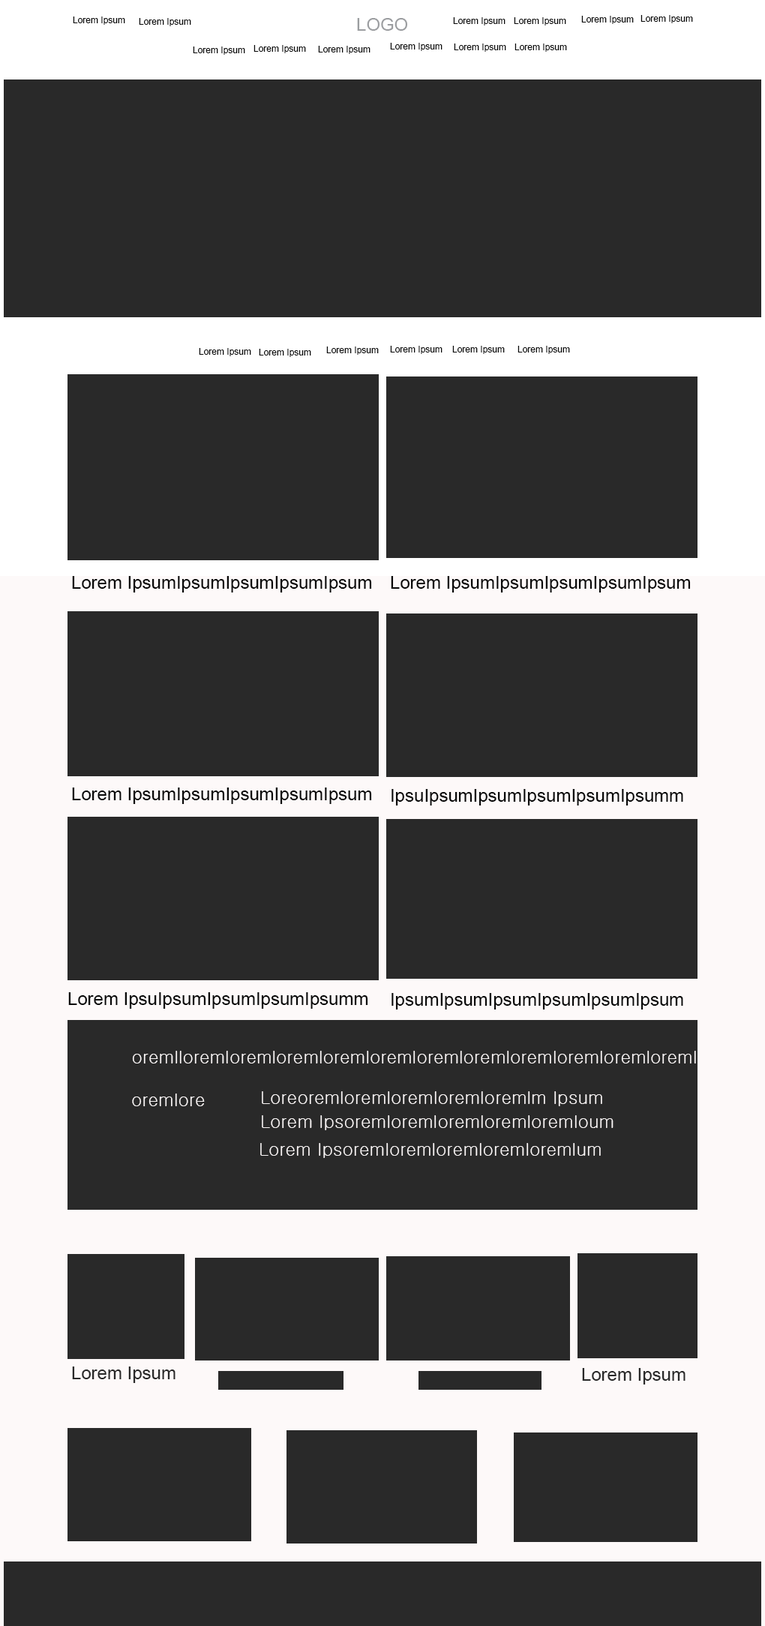
<style>
.page{position:relative;width:765px;height:1626px;background:#292929}
.page>*{position:absolute;margin:0}
.t1{font:9px "ArialMT";color:#080808}
.t2{font:18px "ArialMT";color:#9b9da0}
.t3{font:18px "ArialMT";color:#080808}
.t4{font:18px "Gulim";color:#faf6f6}
.t5{font:18px "ArialMT";color:#292929}
</style>
<div class="page">
<p class="t1" style="left:73px;top:16px;width:52px;height:9px">Lorem Ipsum</p>
<p class="t1" style="left:453px;top:17px;width:53px;height:9px">Lorem Ipsum</p>
<p class="t1" style="left:514px;top:17px;width:52px;height:9px">Lorem Ipsum</p>
<p class="t1" style="left:581px;top:16px;width:53px;height:8px">Lorem Ipsum</p>
<p class="t1" style="left:640px;top:15px;width:53px;height:8px">Lorem Ipsum</p>
<p class="t1" style="left:139px;top:18px;width:52px;height:8px">Lorem Ipsum</p>
<p class="t2" style="left:357px;top:18px;width:51px;height:13px">LOGO</p>
<p class="t1" style="left:193px;top:46px;width:52px;height:9px">Lorem Ipsum</p>
<p class="t1" style="left:254px;top:45px;width:52px;height:8px">Lorem Ipsum</p>
<p class="t1" style="left:318px;top:46px;width:52px;height:8px">Lorem Ipsum</p>
<p class="t1" style="left:390px;top:43px;width:52px;height:8px">Lorem Ipsum</p>
<p class="t1" style="left:454px;top:44px;width:52px;height:8px">Lorem Ipsum</p>
<p class="t1" style="left:514px;top:44px;width:53px;height:8px">Lorem Ipsum</p>
<p class="t1" style="left:199px;top:348px;width:52px;height:8px">Lorem Ipsum</p>
<p class="t1" style="left:259px;top:349px;width:52px;height:8px">Lorem Ipsum</p>
<p class="t1" style="left:326px;top:346px;width:53px;height:9px">Lorem Ipsum</p>
<p class="t1" style="left:390px;top:346px;width:52px;height:8px">Lorem Ipsum</p>
<p class="t1" style="left:452px;top:346px;width:53px;height:8px">Lorem Ipsum</p>
<p class="t1" style="left:518px;top:346px;width:52px;height:8px">Lorem Ipsum</p>
<p class="t3" style="left:72px;top:576px;width:300px;height:16px">Lorem IpsumIpsumIpsumIpsumIpsum</p>
<p class="t3" style="left:391px;top:576px;width:300px;height:16px">Lorem IpsumIpsumIpsumIpsumIpsum</p>
<p class="t3" style="left:72px;top:788px;width:300px;height:16px">Lorem IpsumIpsumIpsumIpsumIpsum</p>
<p class="t3" style="left:392px;top:789px;width:291px;height:17px">IpsuIpsumIpsumIpsumIpsumIpsumm</p>
<p class="t3" style="left:68px;top:992px;width:300px;height:17px">Lorem IpsuIpsumIpsumIpsumIpsumm</p>
<p class="t3" style="left:392px;top:993px;width:291px;height:17px">IpsumIpsumIpsumIpsumIpsumIpsum</p>
<p class="t4" style="left:132px;top:1051px;width:564px;height:13px">oremlloremloremloremloremloremloremloremloremloremloremloreml</p>
<p class="t4" style="left:132px;top:1094px;width:73px;height:12px">oremlore</p>
<p class="t4" style="left:262px;top:1091px;width:340px;height:15px">Loreoremloremloremloremloremlm Ipsum</p>
<p class="t4" style="left:262px;top:1115px;width:352px;height:15px">Lorem Ipsoremloremloremloremloremloum</p>
<p class="t4" style="left:260px;top:1143px;width:341px;height:15px">Lorem Ipsoremloremloremloremloremlum</p>
<p class="t5" style="left:72px;top:1366px;width:104px;height:17px">Lorem Ipsum</p>
<p class="t5" style="left:582px;top:1368px;width:104px;height:16px">Lorem Ipsum</p>
</div>
